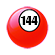
<style>
.page{position:relative;width:55px;height:55px;background:#ffffff}
.page>*{position:absolute;margin:0}
.t1{font:12px "Impact";color:#000000}
.t2{font:13.3px "Impact";color:#000000}
</style>
<div class="page">
<p class="t1" style="left:21px;top:16px;width:17px;height:9px"><span class="t2"> </span>144</p>
</div>
